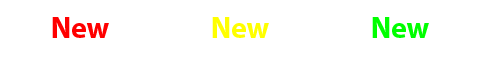
<style>
.page{position:relative;width:480px;height:60px;background:#ffffff}
.page>*{position:absolute;margin:0}
.t1{font:30px "MyriadPro-Bold";color:#ff0000}
.t2{font:30px "MyriadPro-Bold";color:#ffff00}
.t3{font:30px "MyriadPro-Bold";color:#00ff00}
</style>
<div class="page">
<p class="t1" style="left:52px;top:17px;width:57px;height:21px">New</p>
<p class="t2" style="left:212px;top:17px;width:57px;height:21px">New</p>
<p class="t3" style="left:372px;top:17px;width:57px;height:21px">New</p>
</div>
